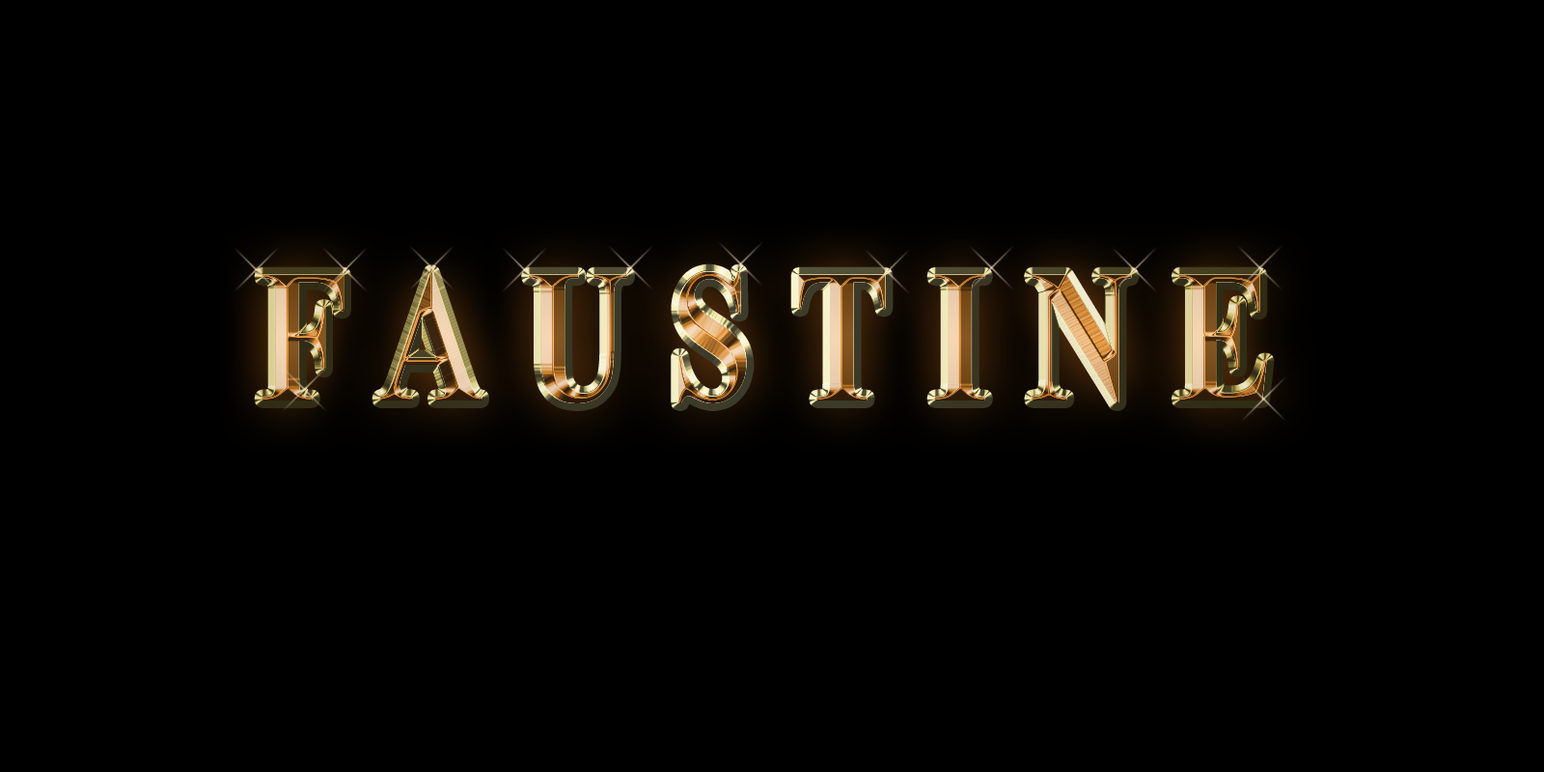
<style>
.page{position:relative;width:1544px;height:772px;background:#000000}
.page>*{position:absolute;margin:0}
.t1{font:189.1px "TimesNewRomanPS-BoldMT";letter-spacing:0.29em;scale:0.76 1}
</style>
<div class="page">
<p class="t1" style="left:262px;top:271px;width:1005px;height:132px">FAUSTINE</p>
<p class="t1" style="left:262px;top:271px;width:1005px;height:132px">FAUSTINE</p>
</div>
